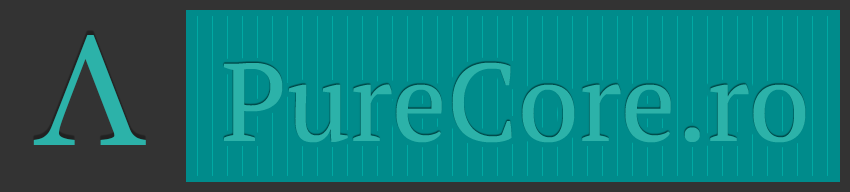
<style>
.page{position:relative;width:850px;height:192px;background:#008b8b}
.page>*{position:absolute;margin:0}
.t1{font:156px "Georgia";color:#2cb2a9}
.t2{font:110px "PTSerif-Regular";color:#2cb2a9}
</style>
<div class="page">
<p class="t1" style="left:33px;top:35px;width:113px;height:110px">Λ</p>
<p class="t2" style="left:224px;top:62px;width:582px;height:81px">PureCore.ro</p>
</div>
